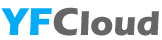
<style>
.page{position:relative;width:162px;height:40px;background:#ffffff}
.page>*{position:absolute;margin:0}
.t1{font:35.6px "ErasITC-Bold";color:#666666}
.t2{font:40px "ErasITC-Bold";color:#04acf7}
.t3{font:40px "ErasITC-Bold";color:#666666}
</style>
<div class="page">
<p class="t1" style="left:1px;top:7px;width:158px;height:29px"><span class="t2">YF</span><span class="t3">C</span>loud</p>
</div>
